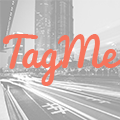
<style>
.page{position:relative;width:120px;height:120px}
.page>*{position:absolute;margin:0}
.t1{font:40px "Pacifico";color:#f6755e}
</style>
<div class="page">
<p class="t1" style="left:2px;top:34px;width:120px;height:52px">TagMe</p>
</div>
